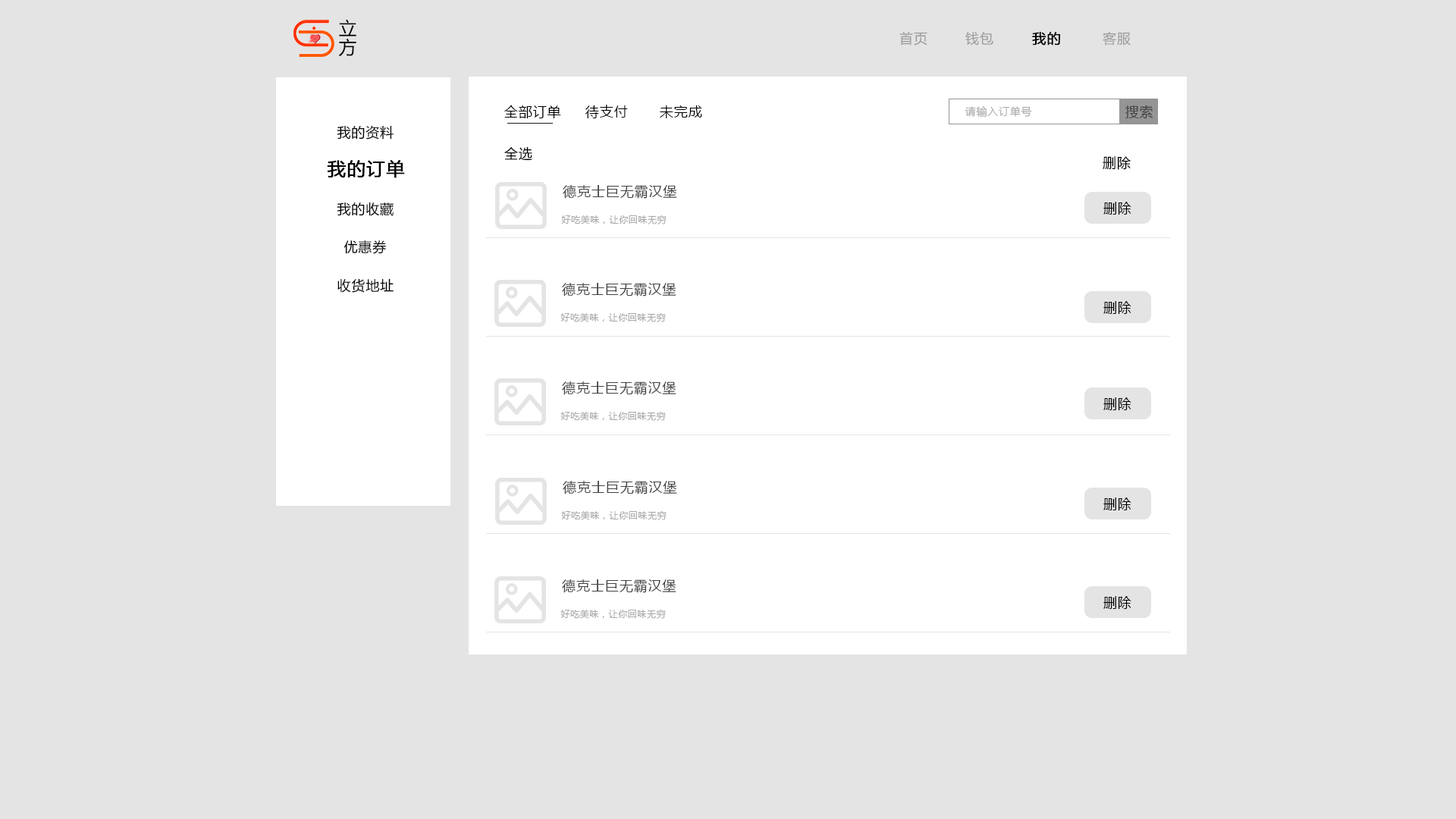
<style>
.page{position:relative;width:1456px;height:819px;background:#e4e4e4}
.page>*{position:absolute;margin:0}
.t1{font:18.2px/13.6px "MicrosoftYaHeiUI";letter-spacing:0.05em;color:#000000}
.t2{font:13.6px "MicrosoftYaHeiUI";letter-spacing:0.05em;color:#9c9c9c}
.t3{font:13.6px "MicrosoftYaHeiUI";letter-spacing:0.05em;color:#000000;font-weight:bold}
.t4{font:13.6px "MicrosoftYaHeiUI";letter-spacing:0.05em;color:#000000}
.t5{font:10.6px "MicrosoftYaHeiUI";letter-spacing:0.05em;color:#adadad}
.t6{font:13.6px "MicrosoftYaHeiUI";letter-spacing:0.05em;color:#434343}
.t7{font:18.2px "MicrosoftYaHeiUI";letter-spacing:0.05em;color:#000000;font-weight:bold}
.t8{font:9.1px "MicrosoftYaHeiUI";letter-spacing:0.05em;color:#aaaaaa}
</style>
<div class="page">
<p class="t1" style="left:338px;top:19px;width:18px;height:38px">立方</p>
<p class="t2" style="left:899px;top:32px;width:28px;height:13px">首页</p>
<p class="t2" style="left:965px;top:32px;width:28px;height:13px">钱包</p>
<p class="t3" style="left:1032px;top:32px;width:28px;height:13px">我的</p>
<p class="t2" style="left:1103px;top:32px;width:28px;height:13px">客服</p>
<p class="t4" style="left:504px;top:105px;width:57px;height:13px">全部订单</p>
<p class="t4" style="left:585px;top:105px;width:43px;height:13px">待支付</p>
<p class="t4" style="left:660px;top:105px;width:42px;height:13px">未完成</p>
<p class="t5" style="left:965px;top:106px;width:67px;height:12px">请输入订单号</p>
<p class="t6" style="left:1125px;top:105px;width:28px;height:14px">搜索</p>
<p class="t4" style="left:337px;top:125px;width:57px;height:15px">我的资料</p>
<p class="t4" style="left:504px;top:146px;width:28px;height:15px">全选</p>
<p class="t7" style="left:327px;top:160px;width:78px;height:18px">我的订单</p>
<p class="t4" style="left:1103px;top:156px;width:28px;height:14px">删除</p>
<p class="t6" style="left:563px;top:185px;width:114px;height:14px">德克士巨无霸汉堡</p>
<p class="t4" style="left:337px;top:202px;width:57px;height:14px">我的收藏</p>
<p class="t4" style="left:1103px;top:202px;width:28px;height:13px">删除</p>
<p class="t8" style="left:561px;top:215px;width:106px;height:9px">好吃美味，让你回味无穷</p>
<p class="t4" style="left:344px;top:240px;width:42px;height:14px">优惠券</p>
<p class="t4" style="left:337px;top:278px;width:57px;height:15px">收货地址</p>
<p class="t6" style="left:562px;top:283px;width:114px;height:14px">德克士巨无霸汉堡</p>
<p class="t4" style="left:1103px;top:301px;width:28px;height:13px">删除</p>
<p class="t8" style="left:560px;top:312px;width:106px;height:10px">好吃美味，让你回味无穷</p>
<p class="t6" style="left:562px;top:381px;width:114px;height:14px">德克士巨无霸汉堡</p>
<p class="t4" style="left:1103px;top:397px;width:28px;height:13px">删除</p>
<p class="t8" style="left:560px;top:411px;width:106px;height:10px">好吃美味，让你回味无穷</p>
<p class="t6" style="left:563px;top:481px;width:114px;height:13px">德克士巨无霸汉堡</p>
<p class="t4" style="left:1103px;top:497px;width:28px;height:13px">删除</p>
<p class="t8" style="left:561px;top:510px;width:106px;height:10px">好吃美味，让你回味无穷</p>
<p class="t6" style="left:562px;top:579px;width:114px;height:14px">德克士巨无霸汉堡</p>
<p class="t4" style="left:1103px;top:596px;width:28px;height:13px">删除</p>
<p class="t8" style="left:560px;top:609px;width:106px;height:10px">好吃美味，让你回味无穷</p>
</div>
